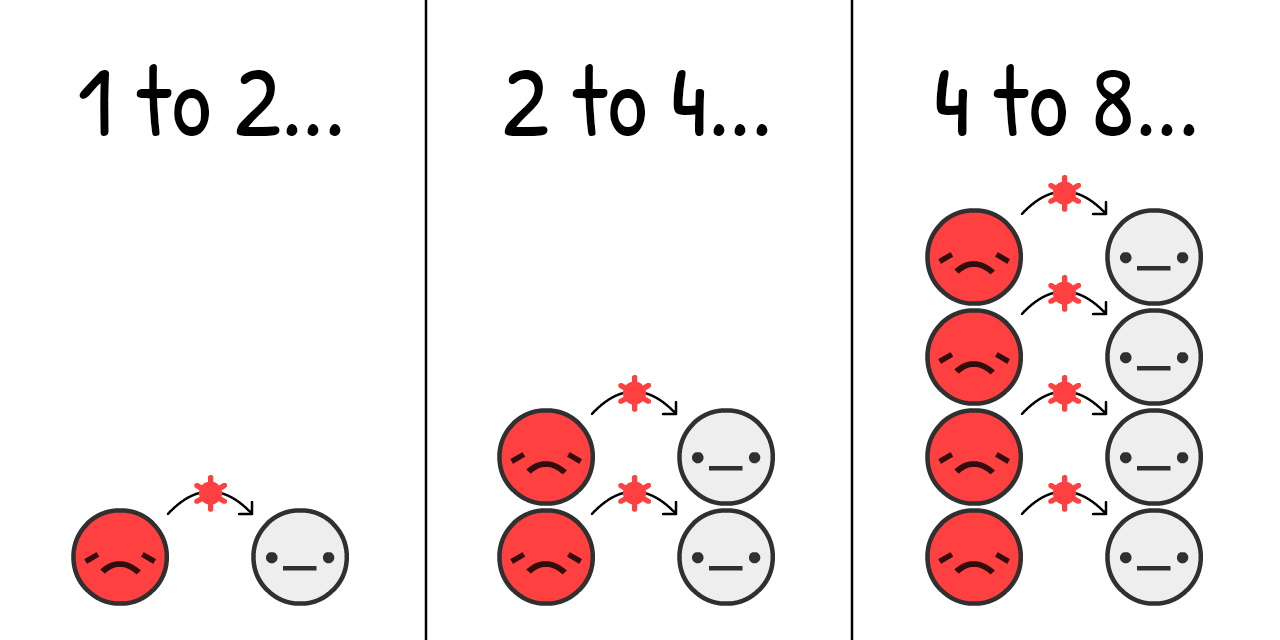
<style>
.page{position:relative;width:1280px;height:640px;background:#ffffff}
.page>*{position:absolute;margin:0}
.t1{font:172px "PatrickHand-Regular";color:#000000}
</style>
<div class="page">
<p class="t1" style="left:79px;top:64px;width:262px;height:72px">1 to 2...</p>
<p class="t1" style="left:504px;top:64px;width:264px;height:72px">2 to 4...</p>
<p class="t1" style="left:936px;top:64px;width:259px;height:72px">4 to 8...</p>
</div>
